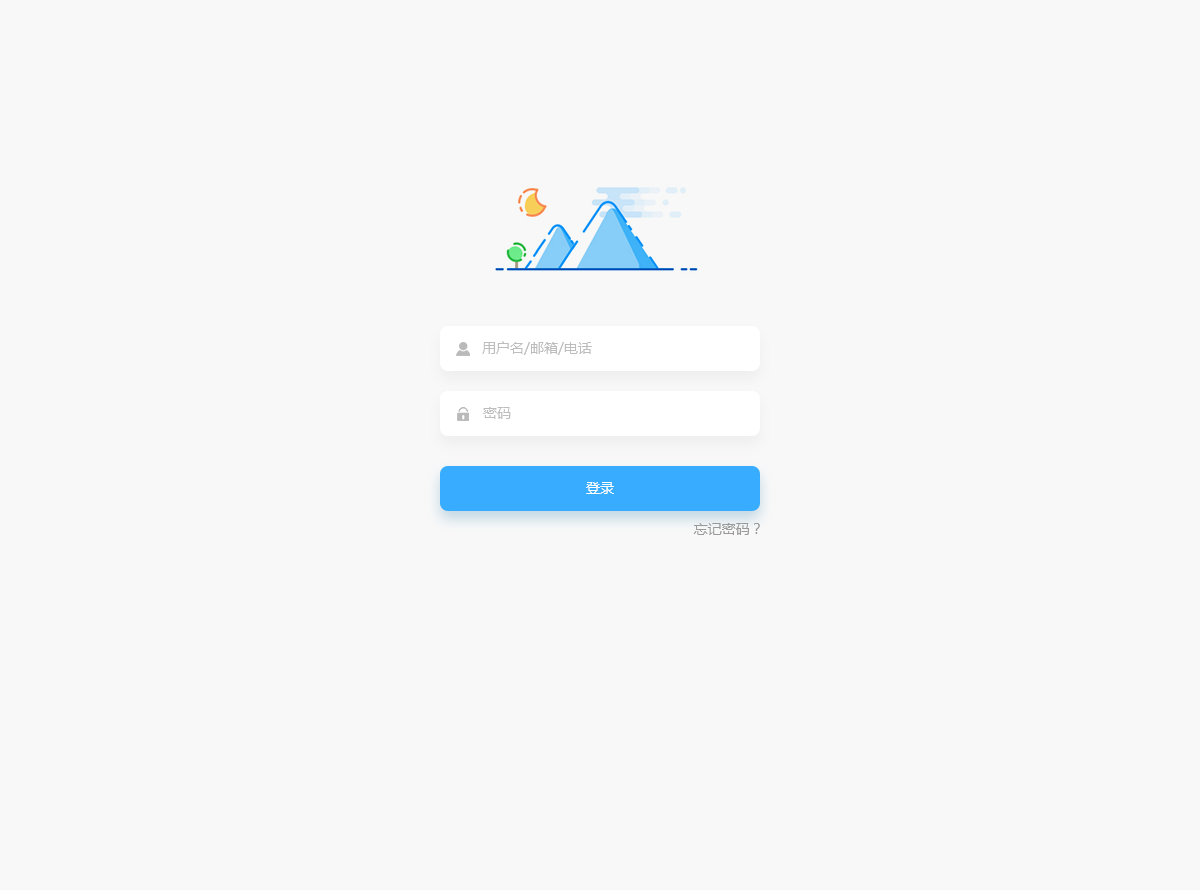
<style>
.page{position:relative;width:1200px;height:890px;background:#f8f8f8}
.page>*{position:absolute;margin:0}
.t1{font:14px "MicrosoftYaHei";color:#bdbdbd}
.t2{font:14px "MicrosoftYaHei";color:#feffff}
.t3{font:14px "MicrosoftYaHei";color:#999999}
</style>
<div class="page">
<p class="t1" style="left:482px;top:341px;width:110px;height:14px">用户名/邮箱/电话</p>
<p class="t1" style="left:483px;top:407px;width:28px;height:12px">密码</p>
<p class="t2" style="left:586px;top:482px;width:28px;height:12px">登录</p>
<p class="t3" style="left:693px;top:523px;width:67px;height:12px">忘记密码？</p>
</div>
